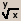
<style>
.page{position:relative;width:21px;height:21px;background:#d9cdc1}
.page>*{position:absolute;margin:0}
.t1{font:9px "Tahoma";color:#000000}
</style>
<div class="page">
<p class="t1" style="left:3px;top:2px;width:5px;height:7px">y</p>
<p class="t1" style="left:13px;top:13px;width:5px;height:5px">x</p>
</div>
